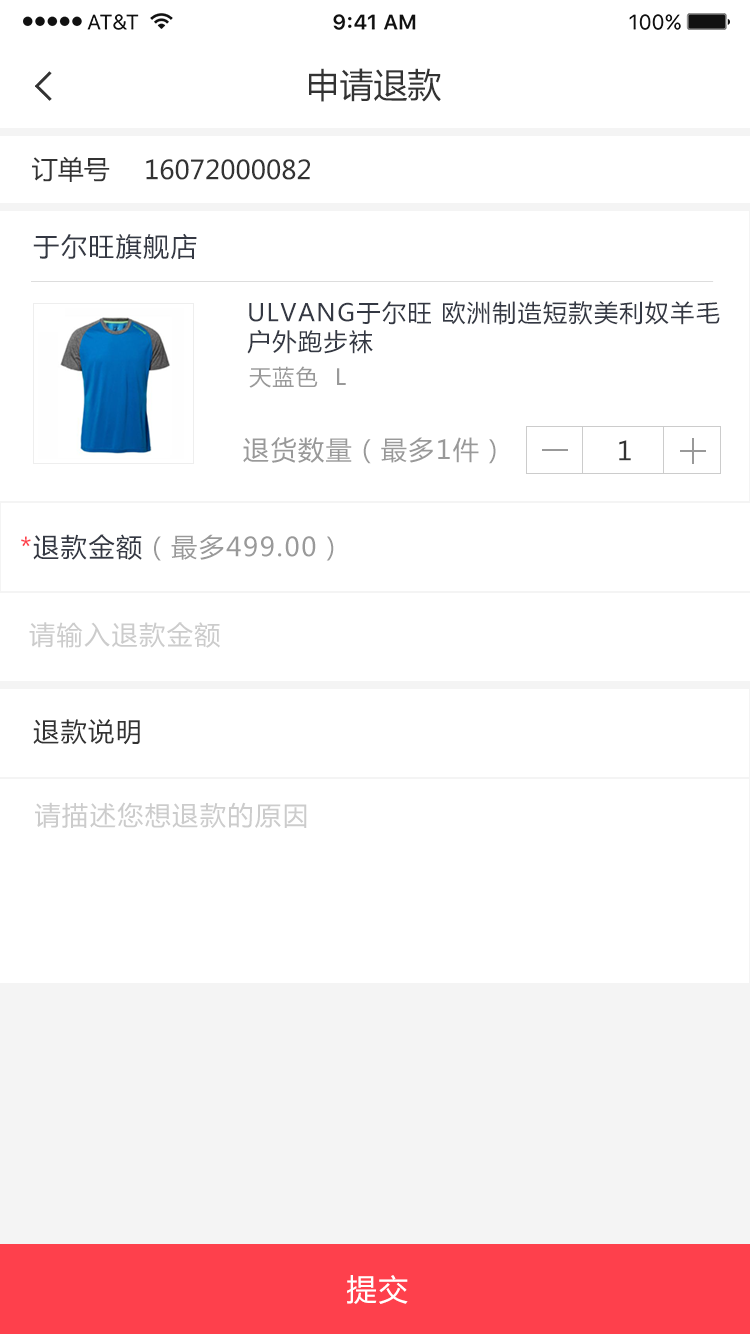
<style>
.page{position:relative;width:750px;height:1334px;background:#ffffff}
.page>*{position:absolute;margin:0}
.t1{font:34px "MicrosoftYaHei";color:#333333}
.t2{font:26px "MicrosoftYaHei";color:#333333}
.t3{font:26px "MicrosoftYaHei";letter-spacing:0.06em;color:#343843}
.t4{font:24px "MicrosoftYaHei";letter-spacing:0.06em;color:#343843}
.t5{font:22px "MicrosoftYaHei";letter-spacing:0.06em;color:#999999}
.t6{font:26px "MicrosoftYaHei";letter-spacing:0.06em;color:#999999}
.t7{font:26px "MicrosoftYaHei";letter-spacing:0.06em;color:#333333}
.t8{font:26px "MicrosoftYaHei";letter-spacing:0.06em;color:#fe404c}
.t9{font:26px "MicrosoftYaHei";letter-spacing:0.06em;color:#cccccc}
.t10{font:30px "MicrosoftYaHei";letter-spacing:0.06em;color:#ffffff}
</style>
<div class="page">
<p class="t1" style="left:309px;top:68px;width:132px;height:34px">申请退款</p>
<p class="t2" style="left:32px;top:156px;width:78px;height:26px">订单号</p>
<p class="t2" style="left:146px;top:159px;width:164px;height:21px">16072000082</p>
<p class="t3" style="left:33px;top:233px;width:164px;height:27px">于尔旺旗舰店</p>
<p class="t4" style="left:247px;top:301px;width:473px;height:53px">ULVANG于尔旺 欧洲制造短款美利奴羊毛户外跑步袜</p>
<p class="t5" style="left:249px;top:366px;width:97px;height:22px">天蓝色  L</p>
<p class="t6" style="left:243px;top:437px;width:253px;height:27px">退货数量（最多1件）</p>
<p class="t7" style="left:619px;top:440px;width:12px;height:21px">1</p>
<p class="t6" style="left:21px;top:534px;width:313px;height:27px"><span class="t8">*</span><span class="t3">退款金额</span>（最多499.00）</p>
<p class="t9" style="left:29px;top:622px;width:191px;height:26px">请输入退款金额</p>
<p class="t7" style="left:33px;top:719px;width:107px;height:26px">退款说明</p>
<p class="t9" style="left:35px;top:802px;width:272px;height:26px">请描述您想退款的原因</p>
<p class="t10" style="left:347px;top:1275px;width:61px;height:29px">提交</p>
</div>
